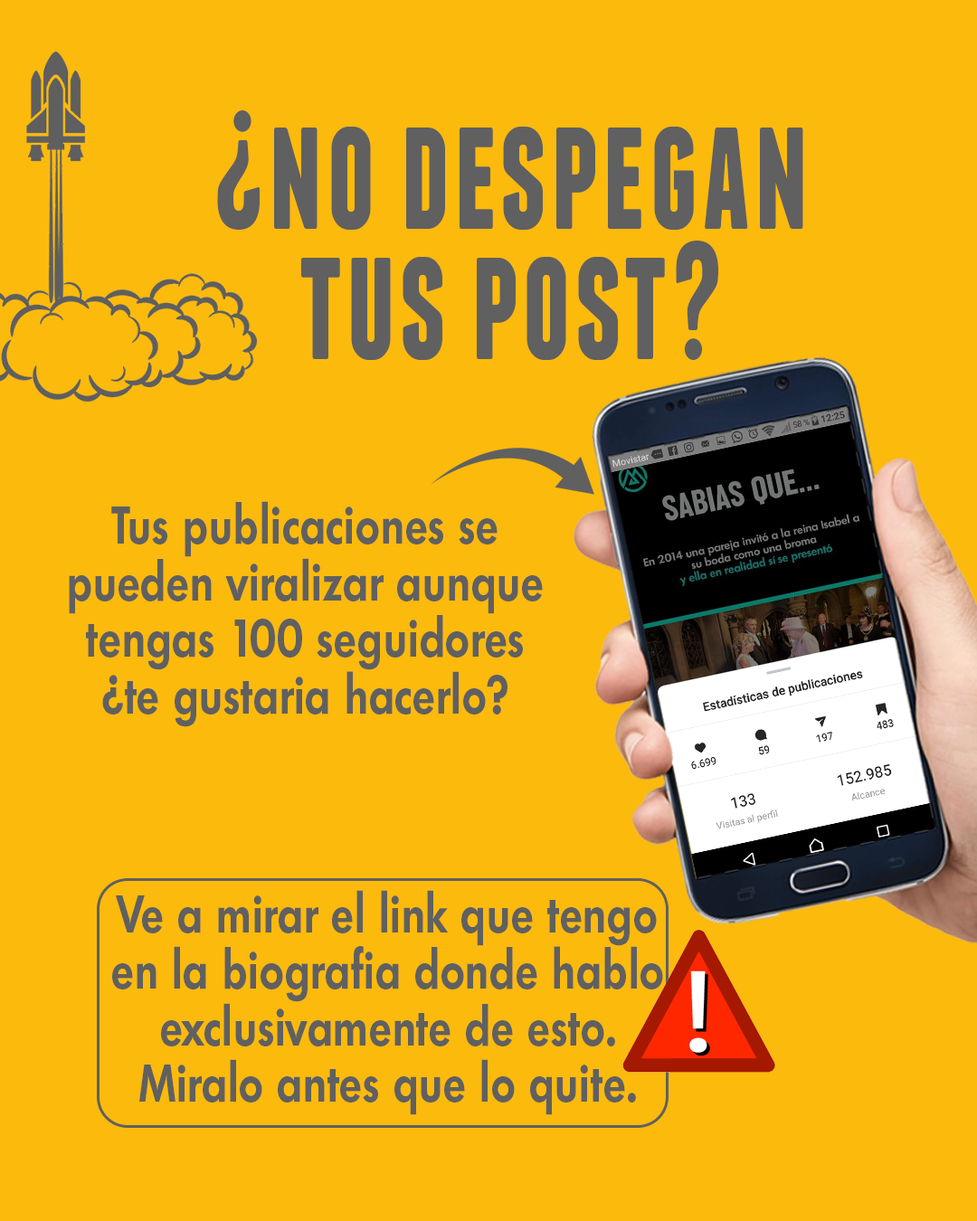
<style>
.page{position:relative;width:977px;height:1221px;background:#fcba0c}
.page>*{position:absolute;margin:0}
.t1{font:168.1px/130.1px "FranchiseFree-Bold";letter-spacing:0.024em;color:#606060;scale:0.81 1}
.t2{font:51.4px/56.5px "Limerick-DemiBold";letter-spacing:0.024em;color:#606060;scale:0.81 1}
</style>
<div class="page">
<p class="t1" style="left:217px;top:110px;width:586px;height:250px;text-align:center">¿no despegan<br>tus post?</p>
<p class="t2" style="left:69px;top:501px;width:474px;height:226px;text-align:center">Tus publicaciones se pueden viralizar aunque tengas 100 seguidores <br>¿te gustaria hacerlo?</p>
<p class="t2" style="left:112px;top:890px;width:551px;height:225px;text-align:center">Ve a mirar el link que tengo en la biografia donde hablo exclusivamente de esto.<br>Miralo antes que lo quite.</p>
</div>
